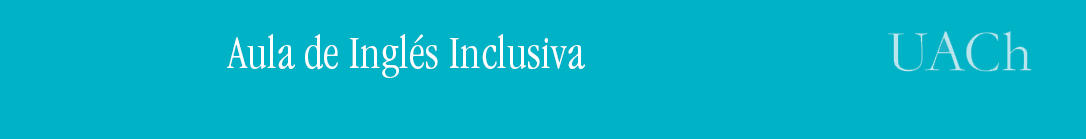
<style>
.page{position:relative;width:1086px;height:139px;background:#00b2c5}
.page>*{position:absolute;margin:0}
.t1{font:48px "GaramondITCbyBT-LightCondensed";color:#ffffff}
</style>
<div class="page">
<p class="t1" style="left:227px;top:34px;width:358px;height:44px">Aula de Inglés Inclusiva</p>
</div>
